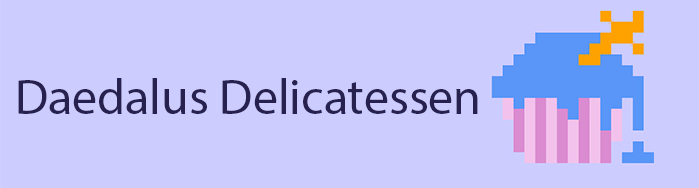
<style>
.page{position:relative;width:699px;height:188px;background:#ccccff}
.page>*{position:absolute;margin:0}
.t1{font:50px "MyriadPro-Regular";color:#27214f}
</style>
<div class="page">
<p class="t1" style="left:18px;top:78px;width:460px;height:36px">Daedalus Delicatessen</p>
</div>
